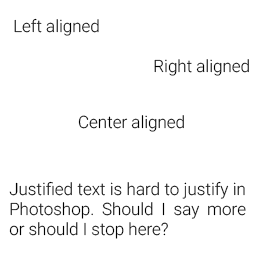
<style>
.page{position:relative;width:256px;height:256px;background:#ffffff}
.page>*{position:absolute;margin:0}
.t1{font:17px "Roboto-Light";color:#000000}
</style>
<div class="page">
<p class="t1" style="left:14px;top:18px;width:85px;height:18px">Left aligned</p>
<p class="t1" style="left:154px;top:59px;width:95px;height:17px">Right aligned</p>
<p class="t1" style="left:78px;top:115px;width:106px;height:17px">Center aligned</p>
<p class="t1" style="left:9px;top:181px;width:237px;height:58px;text-align:justify">Justified text is hard to justify in Photoshop. Should I say more or should I stop here?</p>
</div>
